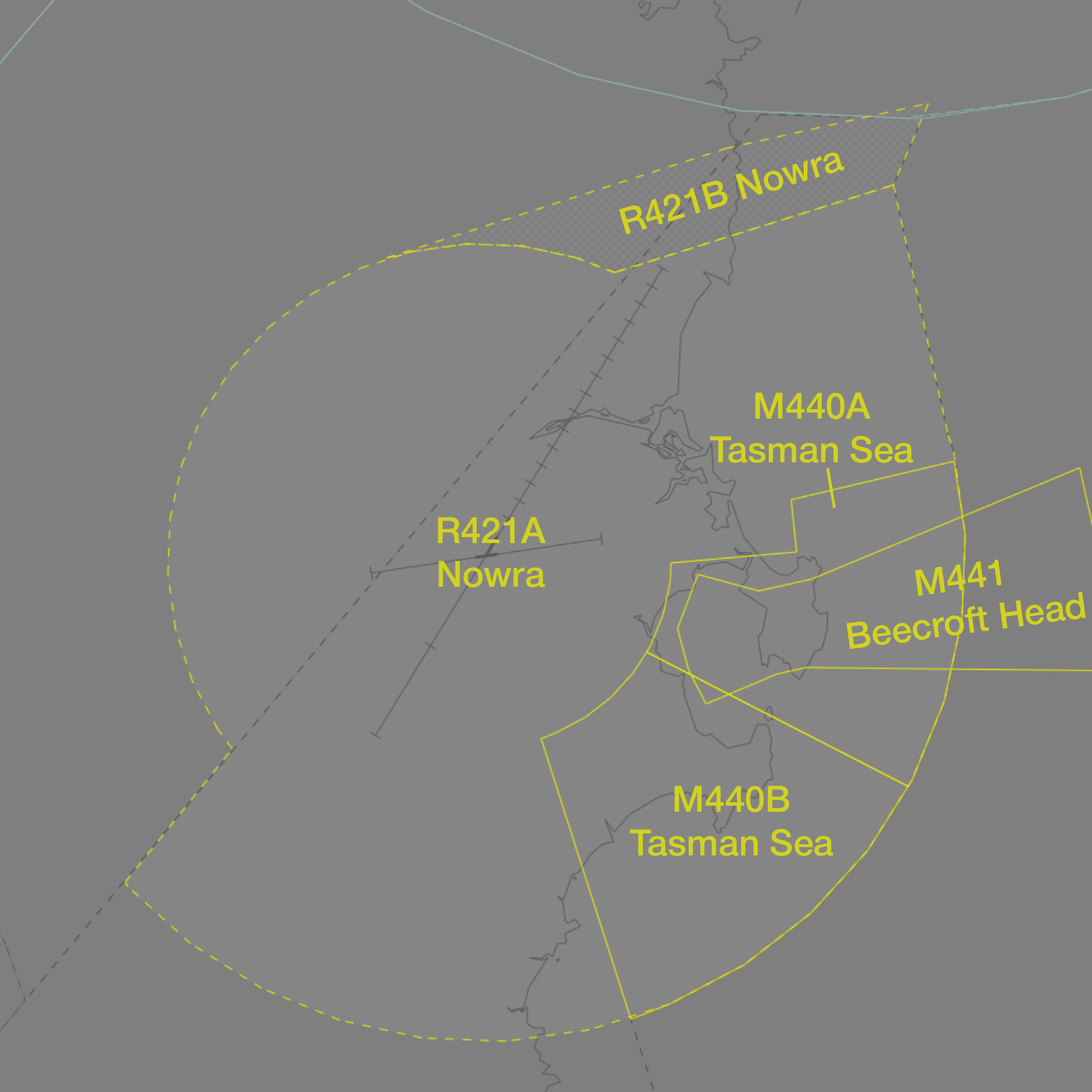
<style>
.page{position:relative;width:1092px;height:1092px;background:#7f7f7f}
.page>*{position:absolute;margin:0}
.t1{font:36.4px "HelveticaNeue-Medium";color:#d2d21e}
</style>
<div class="page">
<p class="t1" style="left:619px;top:152px;width:226px;height:82px;rotate:-17deg">R421B Nowra</p>
<p class="t1" style="left:710px;top:392px;width:204px;height:71px;text-align:center">M440A<br>Tasman Sea</p>
<p class="t1" style="left:438px;top:517px;width:108px;height:70px;text-align:center">R421A<br>Nowra</p>
<p class="t1" style="left:847px;top:559px;width:239px;height:90px;text-align:center;rotate:-8deg">M441<br>Beecroft Head</p>
<p class="t1" style="left:630px;top:786px;width:204px;height:70px;text-align:center">M440B<br>Tasman Sea</p>
</div>
